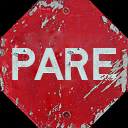
<style>
.page{position:relative;width:128px;height:128px}
.page>*{position:absolute;margin:0}
.t1{font:46.3px "IncompleetaRegularReveal";color:#c6dfde}
</style>
<div class="page">
<p class="t1" style="left:12px;top:48px;width:104px;height:32px">PARE</p>
</div>
